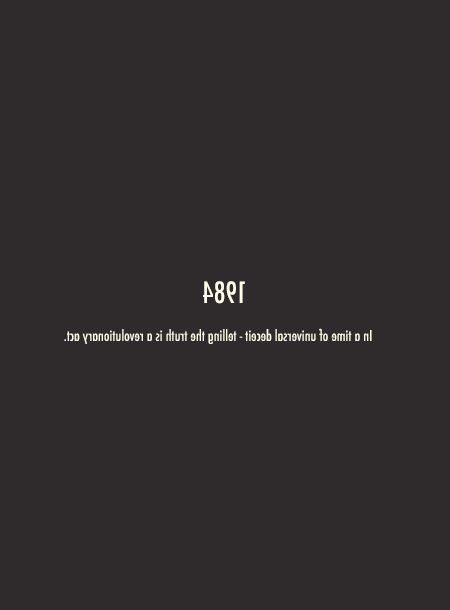
<style>
.page{position:relative;width:450px;height:610px;background:#2f2b2c}
.page>*{position:absolute;margin:0}
.t1{font:28.4px "Futura-CondensedMedium";color:#fffde8}
.t2{font:14.4px "Futura-CondensedMedium";color:#fffde8}
</style>
<div class="page">
<p class="t1" style="left:203px;top:281px;width:42px;height:23px;rotate:180deg">1984</p>
<p class="t2" style="left:64px;top:328px;width:308px;height:16px;rotate:180deg">In a time of universal deceit - telling the truth is a revolutionary act.</p>
</div>
